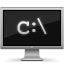
<style>
.page{position:relative;width:64px;height:64px;background:#ffffff}
.page>*{position:absolute;margin:0}
.t1{font:22px "CourierNewPS-BoldMT";letter-spacing:-0.125em}
.t2{font:22px "CourierNewPS-BoldMT";letter-spacing:-0.2em}
.t3{font:20px "CourierNewPS-BoldMT";letter-spacing:-0.1em}
</style>
<div class="page">
<p class="t1" style="left:17px;top:18px;width:30px;height:17px">C<span class="t2">:</span><span class="t3">\</span></p>
</div>
